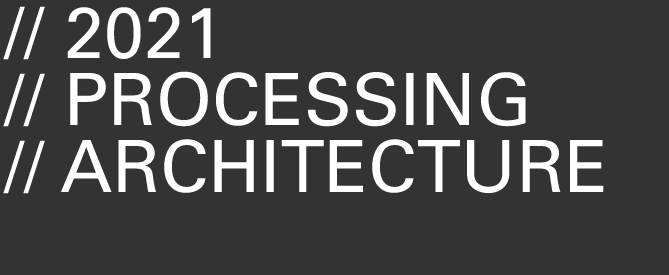
<style>
.page{position:relative;width:669px;height:275px;background:#333333}
.page>*{position:absolute;margin:0}
.t1{font:72px/67px "UniversLTStd";color:#ffffff}
</style>
<div class="page">
<p class="t1" style="left:3px;top:6px;width:601px;height:188px">// 2021<br>// PROCESSING<br>// ARCHITECTURE</p>
</div>
